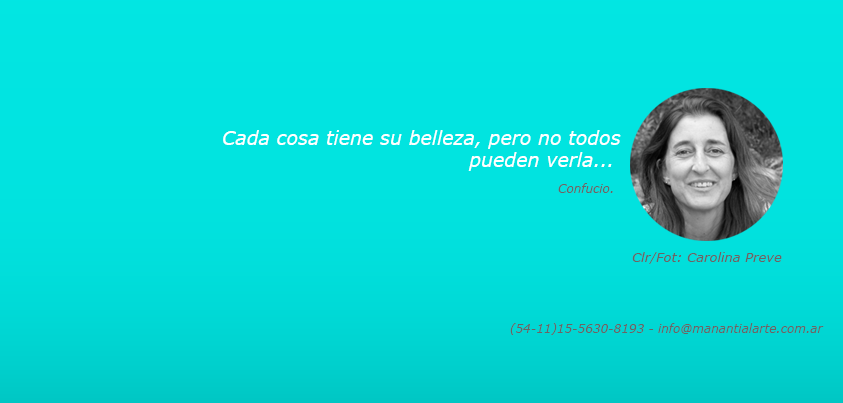
<style>
.page{position:relative;width:843px;height:403px}
.page>*{position:absolute;margin:0}
.t1{font:19px/22px "Verdana-Italic";color:#ffffff}
.t2{font:12px "Verdana-Italic";color:#676666}
.t3{font:13px "Verdana-Italic";color:#676666}
.t4{font:12px "Verdana-Italic";color:#262626}
</style>
<div class="page">
<p class="t1" style="left:223px;top:130px;width:398px;height:41px;text-align:justify">Cada cosa tiene su belleza, pero no todos <br>                                     pueden verla...</p>
<p class="t2" style="left:558px;top:183px;width:55px;height:10px">Confucio.</p>
<p class="t3" style="left:632px;top:252px;width:150px;height:12px">Clr/Fot: Carolina Preve</p>
<p class="t2" style="left:510px;top:323px;width:314px;height:12px"><span class="t4"> <br></span>(54-11)15-5630-8193 - info@manantialarte.com.ar</p>
</div>
